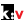
<style>
.page{position:relative;width:24px;height:24px;background:#ffffff}
.page>*{position:absolute;margin:0}
.t1{font:18px "Biko-Bold"}
</style>
<div class="page">
<p class="t1" style="left:1px;top:5px;width:23px;height:15px">k:v</p>
</div>
